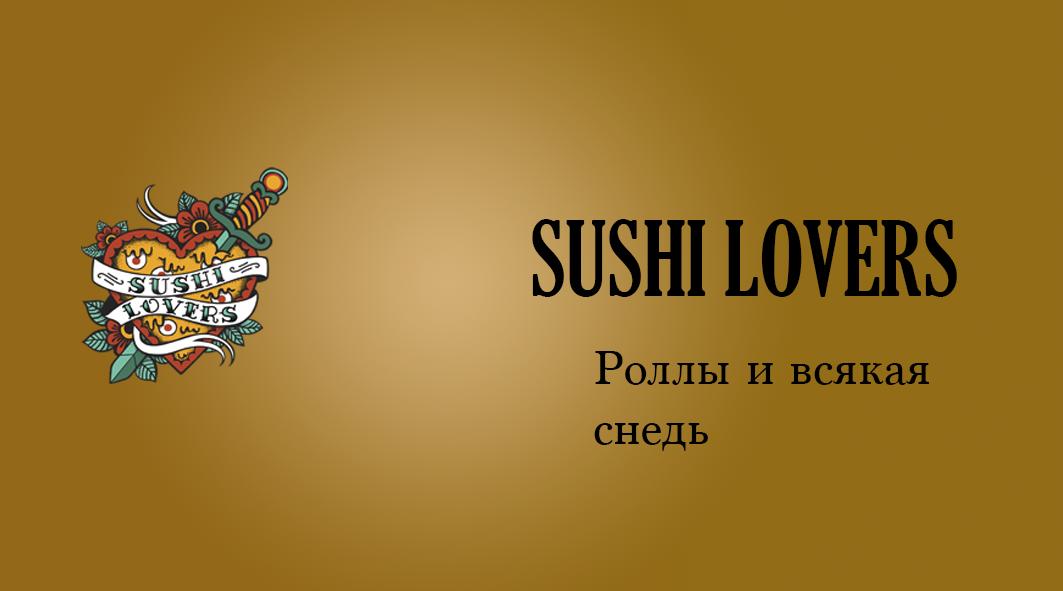
<style>
.page{position:relative;width:1063px;height:591px;background:#926c17}
.page>*{position:absolute;margin:0}
.t1{font:100px "GloucesterMT-ExtraCondensed";color:#000000}
.t2{font:50px "Marion-Regular";color:#000000}
</style>
<div class="page">
<p class="t1" style="left:532px;top:219px;width:425px;height:78px">SUSHI LOVERS</p>
<p class="t2" style="left:594px;top:351px;width:335px;height:100px">Роллы и всякая снедь</p>
</div>
